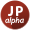
<style>
.page{position:relative;width:30px;height:30px;background:#ffffff}
.page>*{position:absolute;margin:0}
.t1{font:14.7px "MyriadPro-Bold";letter-spacing:0.12em;color:#ffffff;scale:0.94 1}
.t2{font:8.3px "MyriadPro-It";color:#ffffff}
</style>
<div class="page">
<p class="t1" style="left:8px;top:6px;width:15px;height:10px">JP</p>
<p class="t2" style="left:5px;top:17px;width:19px;height:8px">alpha</p>
</div>
